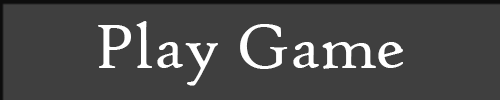
<style>
.page{position:relative;width:500px;height:100px;background:#3f3f3f}
.page>*{position:absolute;margin:0}
.t1{font:67px "HighTowerText-Reg";color:#ffffff}
</style>
<div class="page">
<p class="t1" style="left:98px;top:21px;width:305px;height:65px">Play Game</p>
</div>
